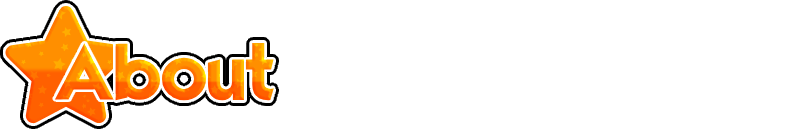
<style>
.page{position:relative;width:803px;height:132px;background:#ffffff}
.page>*{position:absolute;margin:0}
.t1{font:77px "Mouser"}
</style>
<div class="page">
<p class="t1" style="left:54px;top:42px;width:220px;height:59px">About</p>
</div>
